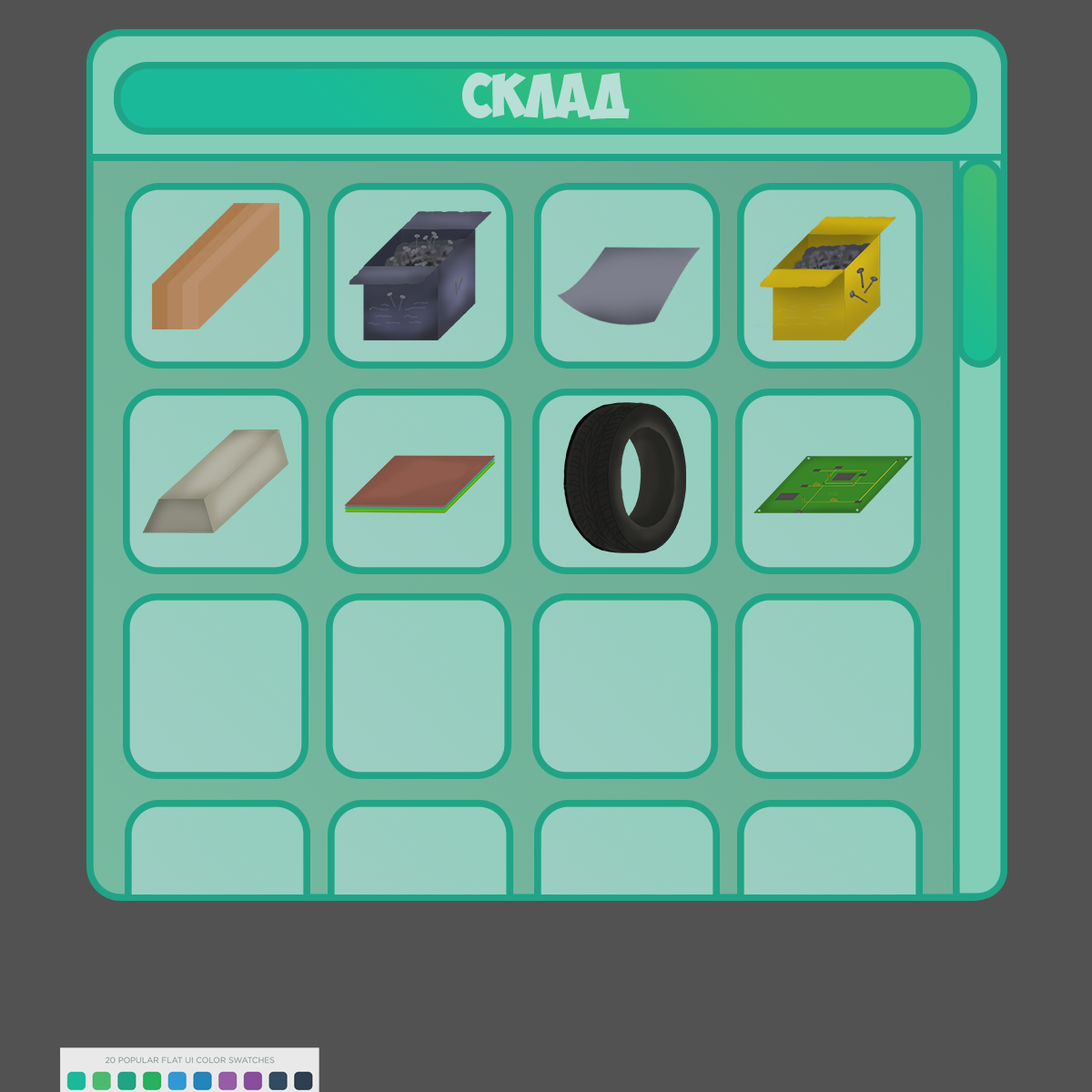
<style>
.page{position:relative;width:1092px;height:1092px;background:#525252}
.page>*{position:absolute;margin:0}
.t1{font:43.7px "ObelixPro";letter-spacing:-0.02em;color:#b7dfd6;scale:1.04 1}
</style>
<div class="page">
<p class="t1" style="left:462px;top:72px;width:168px;height:48px">склад</p>
</div>
